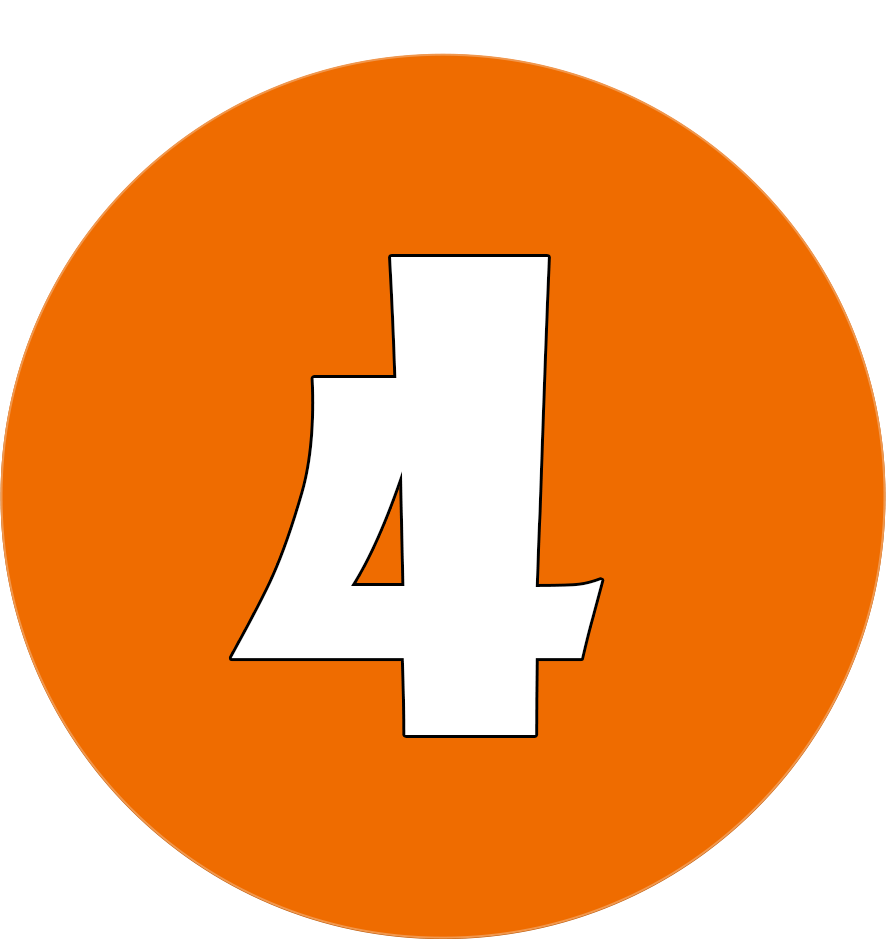
<style>
.page{position:relative;width:886px;height:939px;background:#ef6c00}
.page>*{position:absolute;margin:0}
.t1{font:637.2px "ShowcardGothic-Reg";color:#ffffff}
</style>
<div class="page">
<p class="t1" style="left:231px;top:257px;width:371px;height:478px">4</p>
</div>
